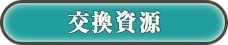
<style>
.page{position:relative;width:228px;height:45px;background:#239e9f}
.page>*{position:absolute;margin:0}
.t1{font:24px "RyuminPr6N-ExBold";letter-spacing:0.075em;color:#ffffff;font-weight:bold;scale:0.9 1}
</style>
<div class="page">
<p class="t1" style="left:68px;top:10px;width:92px;height:24px">交換資源</p>
</div>
